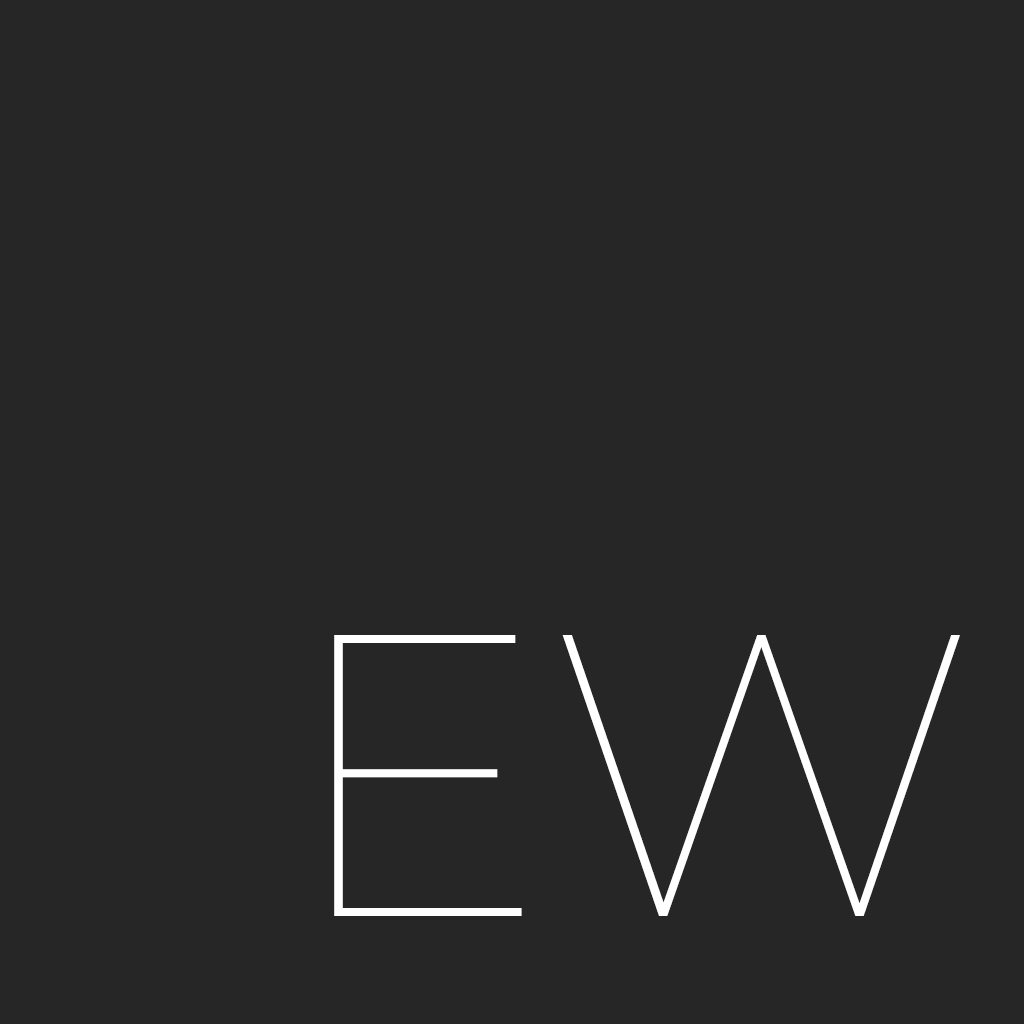
<style>
.page{position:relative;width:1024px;height:1024px;background:#262626}
.page>*{position:absolute;margin:0}
.t1{font:400.8px "Montserrat-Thin";color:#ffffff}
</style>
<div class="page">
<p class="t1" style="left:334px;top:635px;width:626px;height:281px">EW</p>
</div>
